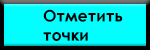
<style>
.page{position:relative;width:150px;height:50px;background:#02ffff}
.page>*{position:absolute;margin:0}
.t1{font:16px "CenturyGothic-Bold";color:#000000}
</style>
<div class="page">
<p class="t1" style="left:43px;top:9px;width:80px;height:32px">Отметить <br>точки</p>
</div>
